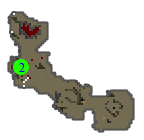
<style>
.page{position:relative;width:144px;height:140px;background:#ffffff}
.page>*{position:absolute;margin:0}
.t1{font:20px "TimesNewRomanPSMT";color:#0101dd}
</style>
<div class="page">
<p class="t1" style="left:19px;top:63px;width:6px;height:9px">2</p>
</div>
